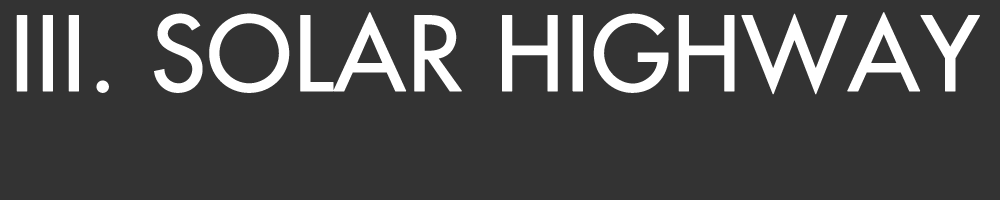
<style>
.page{position:relative;width:1000px;height:200px;background:#333333}
.page>*{position:absolute;margin:0}
.t1{font:100px "Futura";color:#ffffff;font-weight:bold}
</style>
<div class="page">
<p class="t1" style="left:16px;top:12px;width:964px;height:83px">III. SOLAR HIGHWAY</p>
</div>
